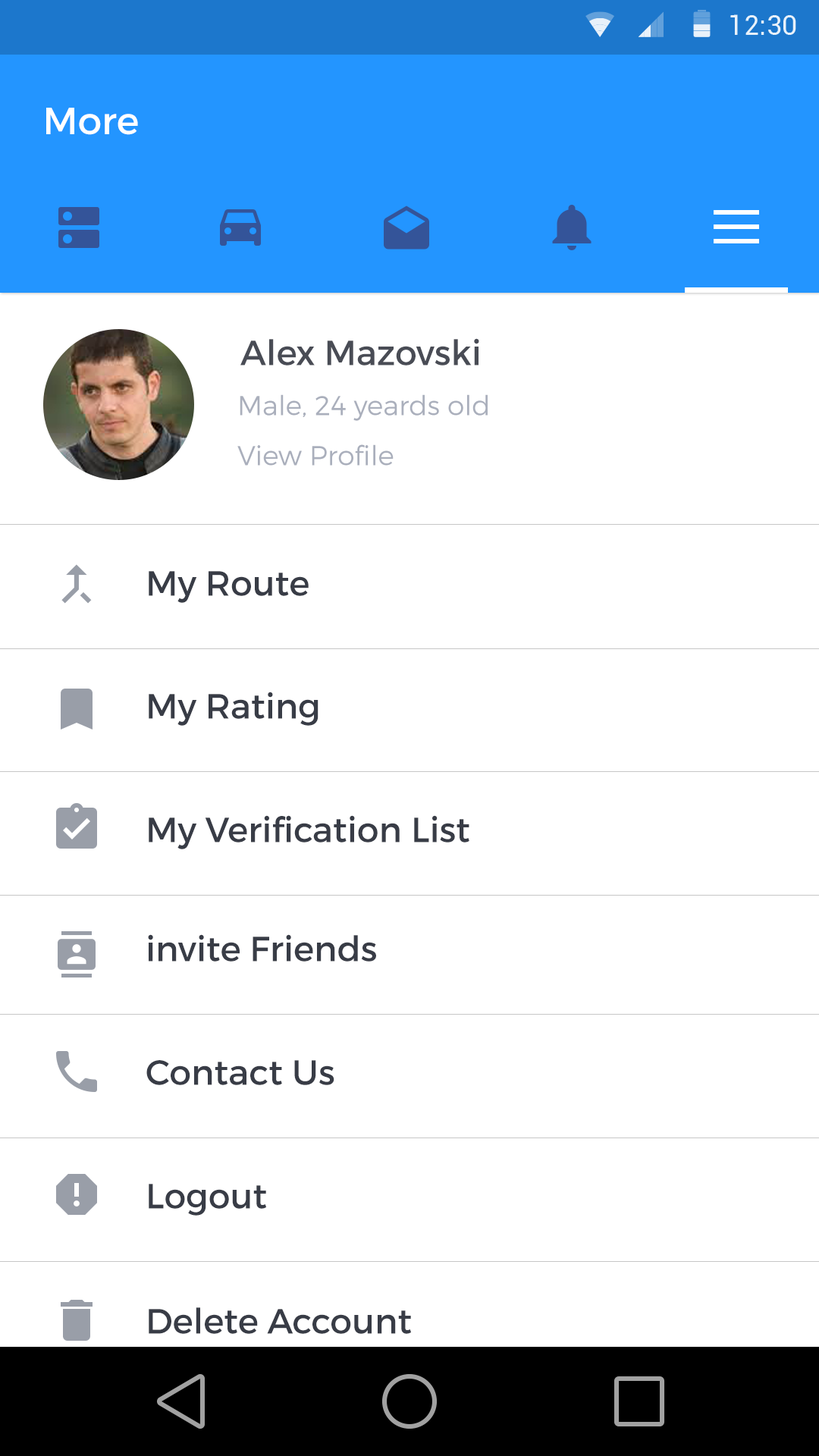
<style>
.page{position:relative;width:819px;height:1456px;background:#ffffff}
.page>*{position:absolute;margin:0}
.t1{font:37.9px "Montserrat-Regular";color:#ffffff}
.t2{font:34.9px "Montserrat-Regular";color:#494c55}
.t3{font:27.3px "Montserrat-Light";color:#aaafbc}
.t4{font:34.9px "Montserrat-Regular";color:#383c46}
</style>
<div class="page">
<p class="t1" style="left:46px;top:108px;width:92px;height:27px">More</p>
<p class="t2" style="left:240px;top:338px;width:239px;height:28px">Alex Mazovski</p>
<p class="t3" style="left:240px;top:394px;width:248px;height:27px">Male, 24 yeards old</p>
<p class="t3" style="left:237px;top:444px;width:157px;height:22px">View Profile</p>
<p class="t4" style="left:149px;top:571px;width:160px;height:32px">My Route</p>
<p class="t4" style="left:149px;top:692px;width:169px;height:34px">My Rating</p>
<p class="t4" style="left:149px;top:815px;width:320px;height:34px">My Verification List</p>
<p class="t4" style="left:148px;top:934px;width:228px;height:28px">invite Friends</p>
<p class="t4" style="left:146px;top:1060px;width:188px;height:25px">Contact Us</p>
<p class="t4" style="left:149px;top:1184px;width:117px;height:32px">Logout</p>
<p class="t4" style="left:149px;top:1307px;width:262px;height:27px">Delete Account</p>
</div>
